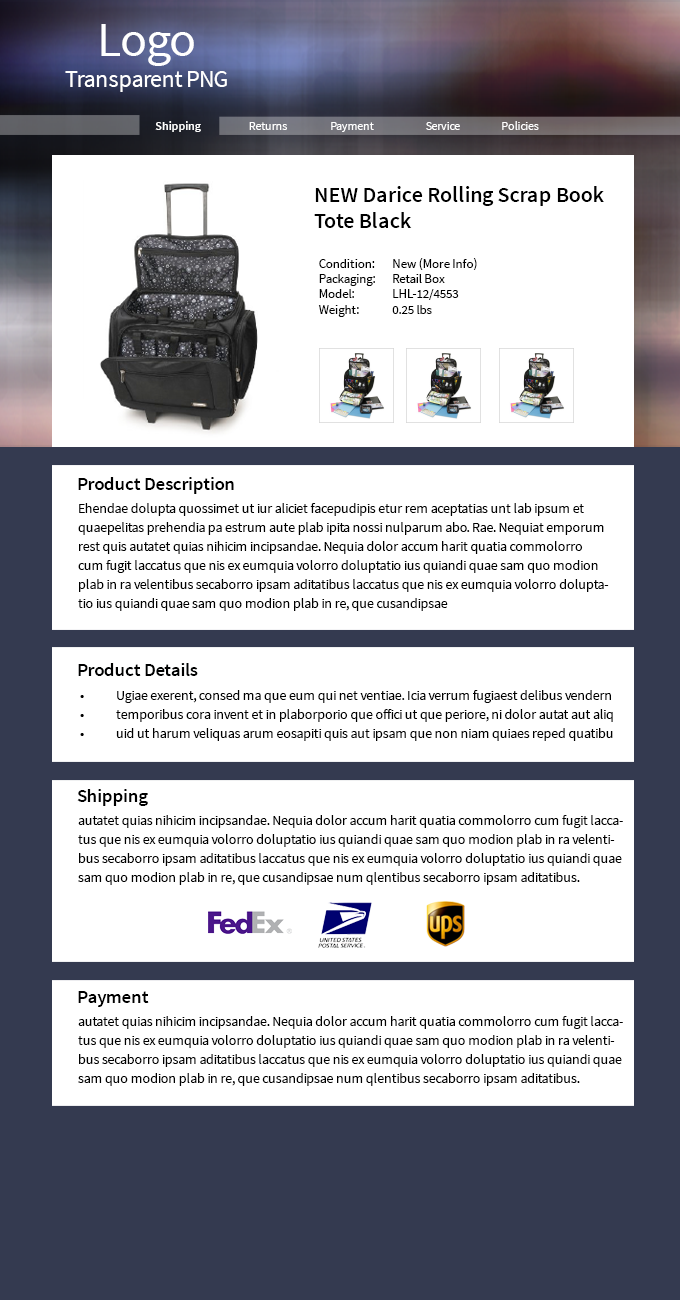
<style>
.page{position:relative;width:680px;height:1300px;background:#ffffff}
.page>*{position:absolute;margin:0}
.t1{font:23.9px/31.4px "SourceSansPro-Regular";letter-spacing:-0.02em;color:#ffffff}
.t2{font:49.3px/31.4px "SourceSansPro-Regular";letter-spacing:-0.02em;color:#ffffff}
.t3{font:12px "SourceSansPro-Semibold";letter-spacing:-0.02em;color:#ffffff}
.t4{font:12px "SourceSansPro-Regular";letter-spacing:-0.02em;color:#ffffff}
.t5{font:21.8px "SourceSansPro-Semibold";color:#000000}
.t6{font:12.8px "SourceSansPro-Regular";color:#000000}
.t7{font:19px "SourceSansPro-Semibold";letter-spacing:-0.02em;color:#000000}
.t8{font:14px/19px "SourceSansPro-Regular";letter-spacing:-0.02em;color:#000000}
.t9{font:19px "SourceSansPro-Semibold";letter-spacing:-0.02em;color:#000101}
</style>
<div class="page">
<p class="t1" style="left:65px;top:24px;width:162px;height:68px;text-align:center"><span class="t2">Logo<br></span>Transparent PNG</p>
<p class="t3" style="left:155px;top:121px;width:46px;height:11px">Shipping</p>
<p class="t4" style="left:249px;top:122px;width:38px;height:8px">Returns</p>
<p class="t4" style="left:331px;top:122px;width:43px;height:10px">Payment</p>
<p class="t4" style="left:426px;top:122px;width:34px;height:8px">Service</p>
<p class="t4" style="left:502px;top:121px;width:37px;height:9px">Policies</p>
<p class="t5" style="left:314px;top:186px;width:290px;height:42px">NEW Darice Rolling Scrap Book <br>Tote Black</p>
<p class="t6" style="left:318px;top:258px;width:159px;height:59px">Condition:  New (More Info)<br>Packaging:  Retail Box<br>Model:  LHL-12/4553<br>Weight:  0.25 lbs</p>
<p class="t7" style="left:78px;top:477px;width:156px;height:17px">Product Description</p>
<p class="t8" style="left:78px;top:503px;width:531px;height:108px">Ehendae dolupta quossimet ut iur aliciet facepudipis etur rem aceptatias unt lab ipsum et quaepelitas prehendia pa estrum aute plab ipita nossi nulparum abo. Rae. Nequiat emporum rest quis autatet quias nihicim incipsandae. Nequia dolor accum harit quatia commolorro cum fugit laccatus que nis ex eumquia volorro doluptatio ius quiandi quae sam quo modion plab in ra velentibus secaborro ipsam aditatibus laccatus que nis ex eumquia volorro doluptatio ius quiandi quae sam quo modion plab in re, que cusandipsae</p>
<p class="t9" style="left:78px;top:663px;width:120px;height:13px">Product Details</p>
<p class="t8" style="left:80px;top:690px;width:533px;height:51px">• Ugiae exerent, consed ma que eum qui net ventiae. Icia verrum fugiaest delibus vendern <br>• temporibus cora invent et in plaborporio que offici ut que periore, ni dolor autat aut aliq<br>• uid ut harum veliquas arum eosapiti quis aut ipsam que non niam quiaes reped quatibu <br>• scidelibus etur?</p>
<p class="t7" style="left:77px;top:789px;width:71px;height:17px">Shipping</p>
<p class="t8" style="left:78px;top:815px;width:545px;height:70px">autatet quias nihicim incipsandae. Nequia dolor accum harit quatia commolorro cum fugit laccatus que nis ex eumquia volorro doluptatio ius quiandi quae sam quo modion plab in ra velentibus secaborro ipsam aditatibus laccatus que nis ex eumquia volorro doluptatio ius quiandi quae sam quo modion plab in re, que cusandipsae num qlentibus secaborro ipsam aditatibus.</p>
<p class="t7" style="left:78px;top:991px;width:71px;height:16px">Payment</p>
<p class="t8" style="left:78px;top:1016px;width:545px;height:70px">autatet quias nihicim incipsandae. Nequia dolor accum harit quatia commolorro cum fugit laccatus que nis ex eumquia volorro doluptatio ius quiandi quae sam quo modion plab in ra velentibus secaborro ipsam aditatibus laccatus que nis ex eumquia volorro doluptatio ius quiandi quae sam quo modion plab in re, que cusandipsae num qlentibus secaborro ipsam aditatibus.</p>
</div>
